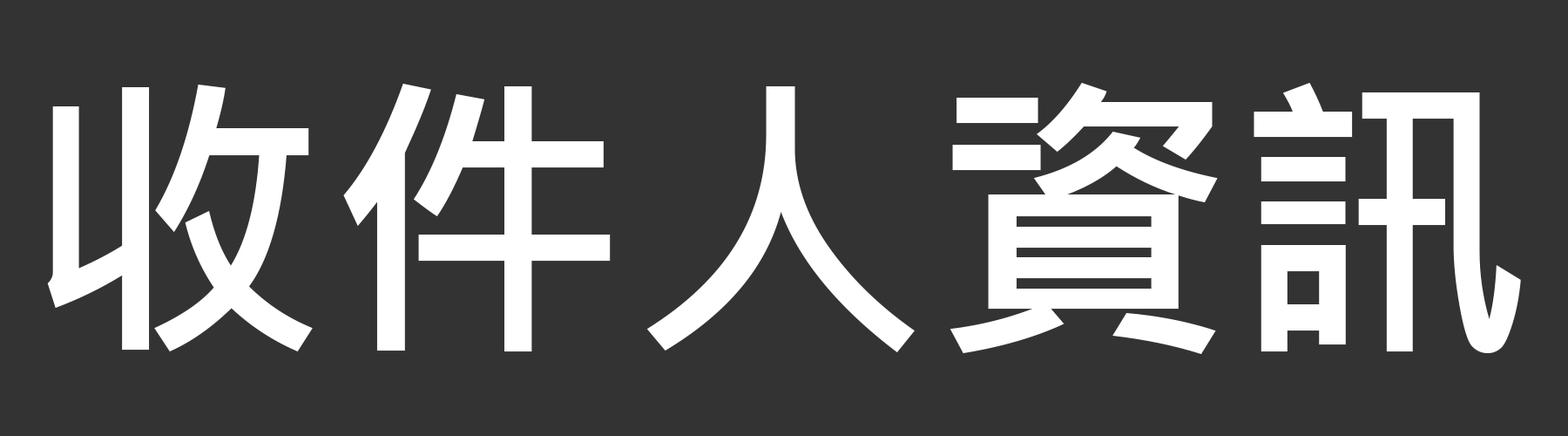
<style>
.page{position:relative;width:1568px;height:436px;background:#333333}
.page>*{position:absolute;margin:0}
.t1{font:302.5px "MicrosoftJhengHeiBold";color:#ffffff}
</style>
<div class="page">
<p class="t1" style="left:47px;top:83px;width:1474px;height:271px">收件人資訊</p>
</div>
